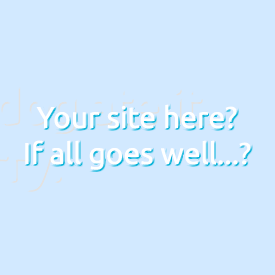
<style>
.page{position:relative;width:275px;height:275px;background:#d2e9ff}
.page>*{position:absolute;margin:0}
.t1{font:30px "Ubuntu-Regular";color:#ffffff}
</style>
<div class="page">
<p class="t1" style="left:25px;top:104px;width:226px;height:66px;text-align:center">Your site here?<br>If all goes well...?</p>
</div>
